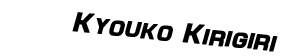
<style>
.page{position:relative;width:283px;height:56px;background:#ffffff}
.page>*{position:absolute;margin:0}
.t1{font:28px "Maximus";color:#000000;font-weight:bold;font-style:italic}
</style>
<div class="page">
<p class="t1" style="left:72px;top:12px;width:206px;height:40px;rotate:6deg">Kyouko Kirigiri</p>
</div>
